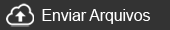
<style>
.page{position:relative;width:170px;height:30px;background:#333333}
.page>*{position:absolute;margin:0}
.t1{font:16px "ArialMT";letter-spacing:-0.01em;color:#ffffff}
</style>
<div class="page">
<p class="t1" style="left:42px;top:9px;width:108px;height:15px">Enviar Arquivos</p>
</div>
